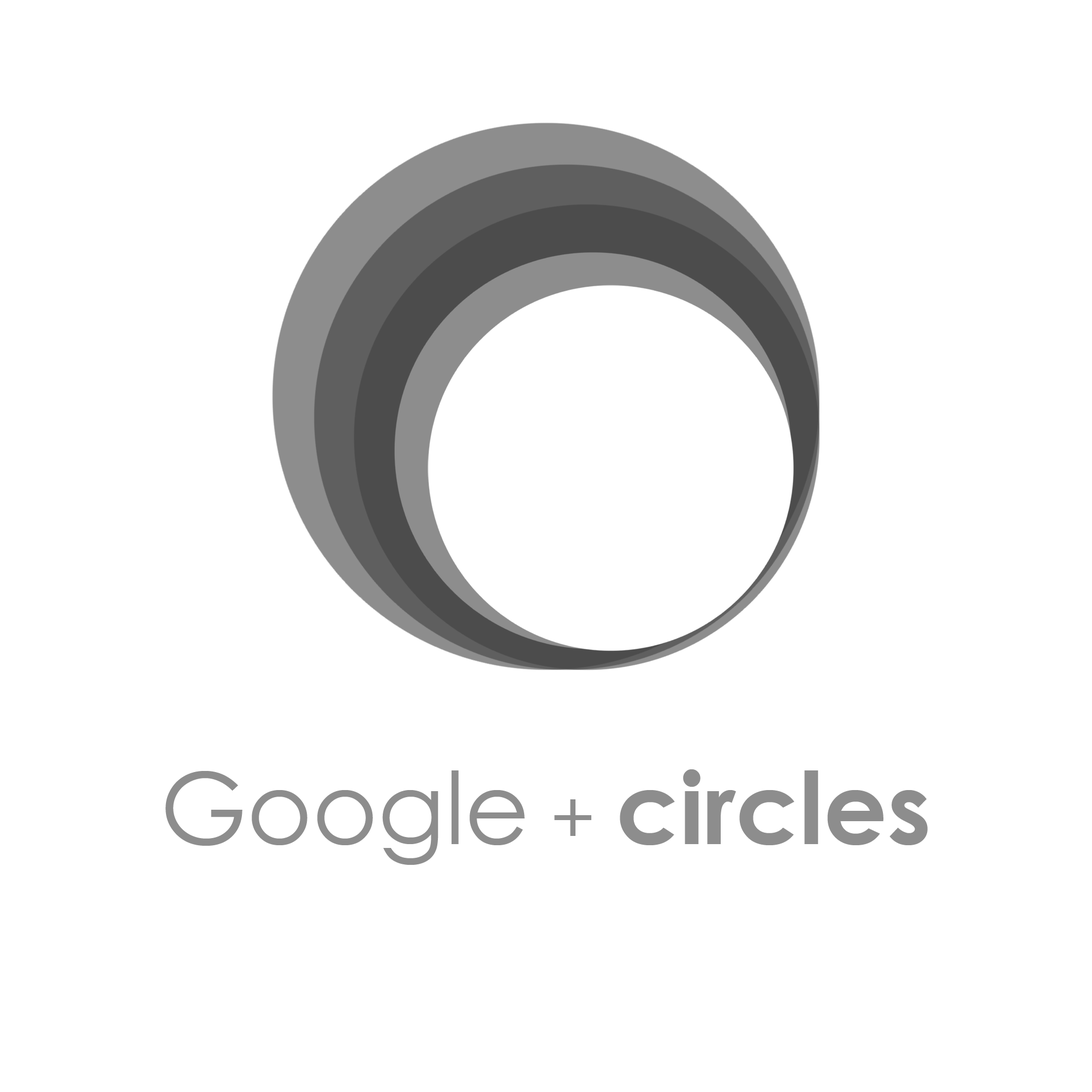
<style>
.page{position:relative;width:1092px;height:1092px;background:#ffffff}
.page>*{position:absolute;margin:0}
.t1{font:99.8px "CenturyGothic-Bold";color:#8d8d8d}
.t2{font:99.8px "CenturyGothic";color:#8d8d8d}
.t3{font:74.1px "CenturyGothic";color:#8d8d8d}
</style>
<div class="page">
<p class="t1" style="left:165px;top:769px;width:763px;height:96px"><span class="t2">Google</span><span class="t3"> + </span>circles</p>
</div>
